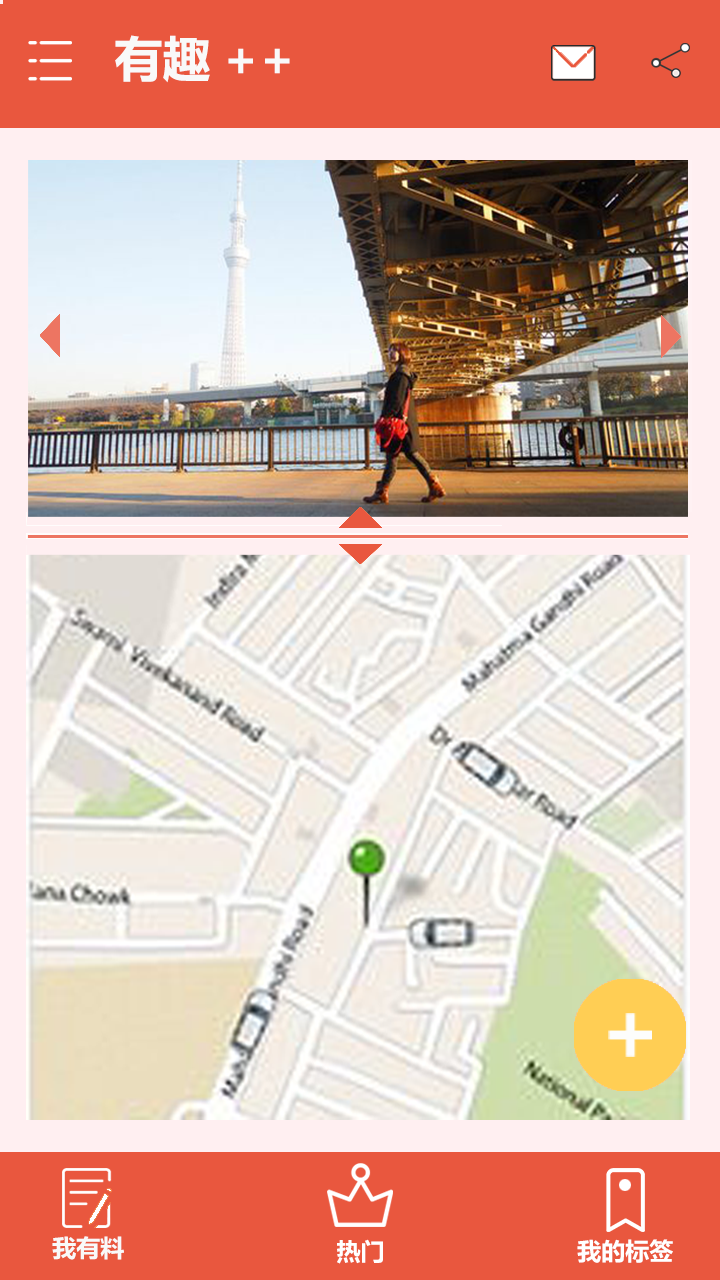
<style>
.page{position:relative;width:720px;height:1280px}
.page>*{position:absolute;margin:0}
.t1{font:48px "MicrosoftYaHei-Bold";color:#f9f9f9}
.t2{font:24px "MicrosoftYaHei-Bold";color:#f9f9f9}
.t3{font:24px "MicrosoftYaHei-Bold";color:#ffffff}
</style>
<div class="page">
<p class="t1" style="left:115px;top:35px;width:175px;height:48px">有趣++</p>
<p class="t2" style="left:52px;top:1236px;width:72px;height:24px">我有料</p>
<p class="t3" style="left:337px;top:1239px;width:46px;height:25px">热门</p>
<p class="t3" style="left:577px;top:1239px;width:96px;height:24px">我的标签</p>
</div>
